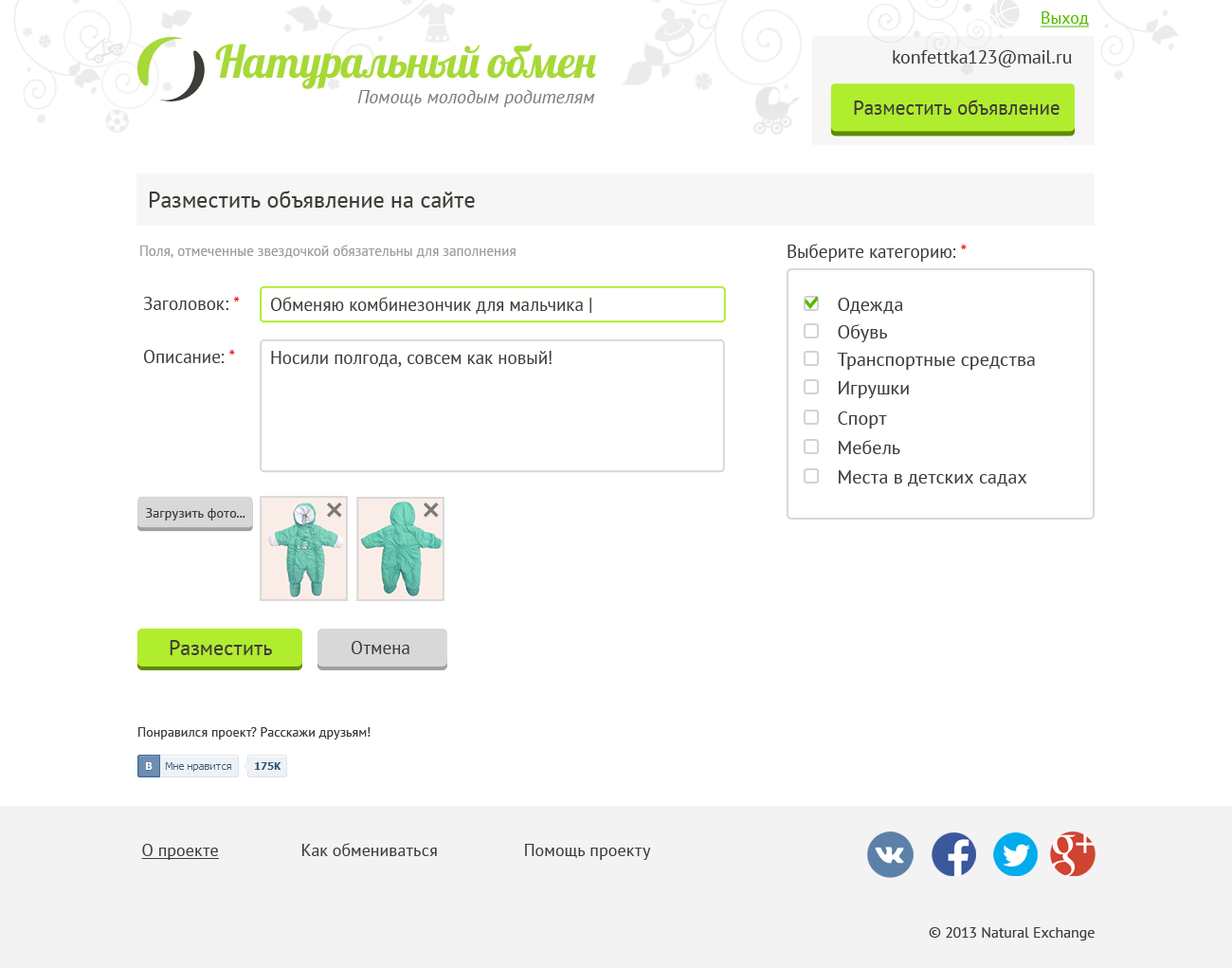
<style>
.page{position:relative;width:1232px;height:968px;background:#ffffff}
.page>*{position:absolute;margin:0}
.t1{font:17.1px "PTSans-Regular";color:#53ba00;text-decoration:underline}
.t2{font:44.9px "Lobster";letter-spacing:-0.08em;color:#a6d937}
.t3{font:19px "PTSans-Regular";color:#3e3e38}
.t4{font:19px "PTSans-Italic";color:#7f7f7f}
.t5{font:19.9px "PTSans-Regular";color:#3e3e38}
.t6{font:22.7px "PTSans-Regular";color:#3e3e38}
.t7{font:14.2px "PTSans-Regular";color:#9c9c9c}
.t8{font:18px "PTSans-Regular";color:#3c3c36}
.t9{font:18px "PTSans-Regular";color:#e91a1a}
.t10{font:18px "PTSans-Regular";color:#3e3e38}
.t11{font:13.4px "PTSans-Regular";color:#3e3e38}
.t12{font:20.9px "PTSans-Regular";color:#3e3e38}
.t13{font:13.3px "PTSans-Regular";color:#3e3e38}
.t14{font:17.1px "PTSans-Regular";color:#3e3e38}
.t15{font:17.1px "PTSans-Regular";color:#3e3e38;text-decoration:underline}
.t16{font:15.2px "PTSans-Regular";color:#3e3e38}
</style>
<div class="page">
<p class="t1" style="left:1041px;top:11px;width:48px;height:16px">Выход</p>
<p class="t2" style="left:215px;top:44px;width:381px;height:45px">Натуральный  обмен</p>
<p class="t3" style="left:893px;top:50px;width:179px;height:17px">konfettka123@mail.ru</p>
<p class="t4" style="left:357px;top:90px;width:238px;height:17px">Помощь молодым родителям</p>
<p class="t5" style="left:854px;top:100px;width:206px;height:15px">Разместить объявление</p>
<p class="t6" style="left:149px;top:191px;width:326px;height:17px">Разместить объявление на сайте</p>
<p class="t7" style="left:140px;top:245px;width:376px;height:13px">Поля, отмеченные звездочкой обязательны для заполнения</p>
<p class="t8" style="left:788px;top:244px;width:179px;height:18px">Выберите категорию: <span class="t9">*</span></p>
<p class="t10" style="left:143px;top:297px;width:97px;height:13px">Заголовок: <span class="t9">*</span></p>
<p class="t10" style="left:271px;top:297px;width:320px;height:17px">Обменяю комбинезончик для мальчика |</p>
<p class="t3" style="left:838px;top:298px;width:65px;height:16px">Одежда</p>
<p class="t3" style="left:838px;top:324px;width:49px;height:18px">Обувь</p>
<p class="t10" style="left:144px;top:350px;width:91px;height:13px">Описание: <span class="t9">*</span></p>
<p class="t10" style="left:271px;top:351px;width:281px;height:16px">Носили полгода, совсем как новый!</p>
<p class="t3" style="left:837px;top:353px;width:198px;height:17px">Транспортные средства</p>
<p class="t3" style="left:839px;top:381px;width:70px;height:17px">Игрушки</p>
<p class="t3" style="left:838px;top:411px;width:49px;height:17px">Спорт</p>
<p class="t3" style="left:839px;top:440px;width:61px;height:14px">Мебель</p>
<p class="t3" style="left:839px;top:470px;width:188px;height:16px">Места в детских садах</p>
<p class="t11" style="left:146px;top:508px;width:99px;height:12px">Загрузить фото...</p>
<p class="t12" style="left:170px;top:640px;width:102px;height:15px">Разместить</p>
<p class="t10" style="left:352px;top:641px;width:57px;height:13px">Отмена</p>
<p class="t13" style="left:138px;top:727px;width:233px;height:12px">Понравился проект? Расскажи друзьям!</p>
<p class="t14" style="left:141px;top:843px;width:510px;height:17px"><span class="t15">О проекте</span>       Как обмениваться            Помощь  проекту</p>
<p class="t16" style="left:929px;top:927px;width:166px;height:13px">© 2013 Natural Exchange</p>
</div>
